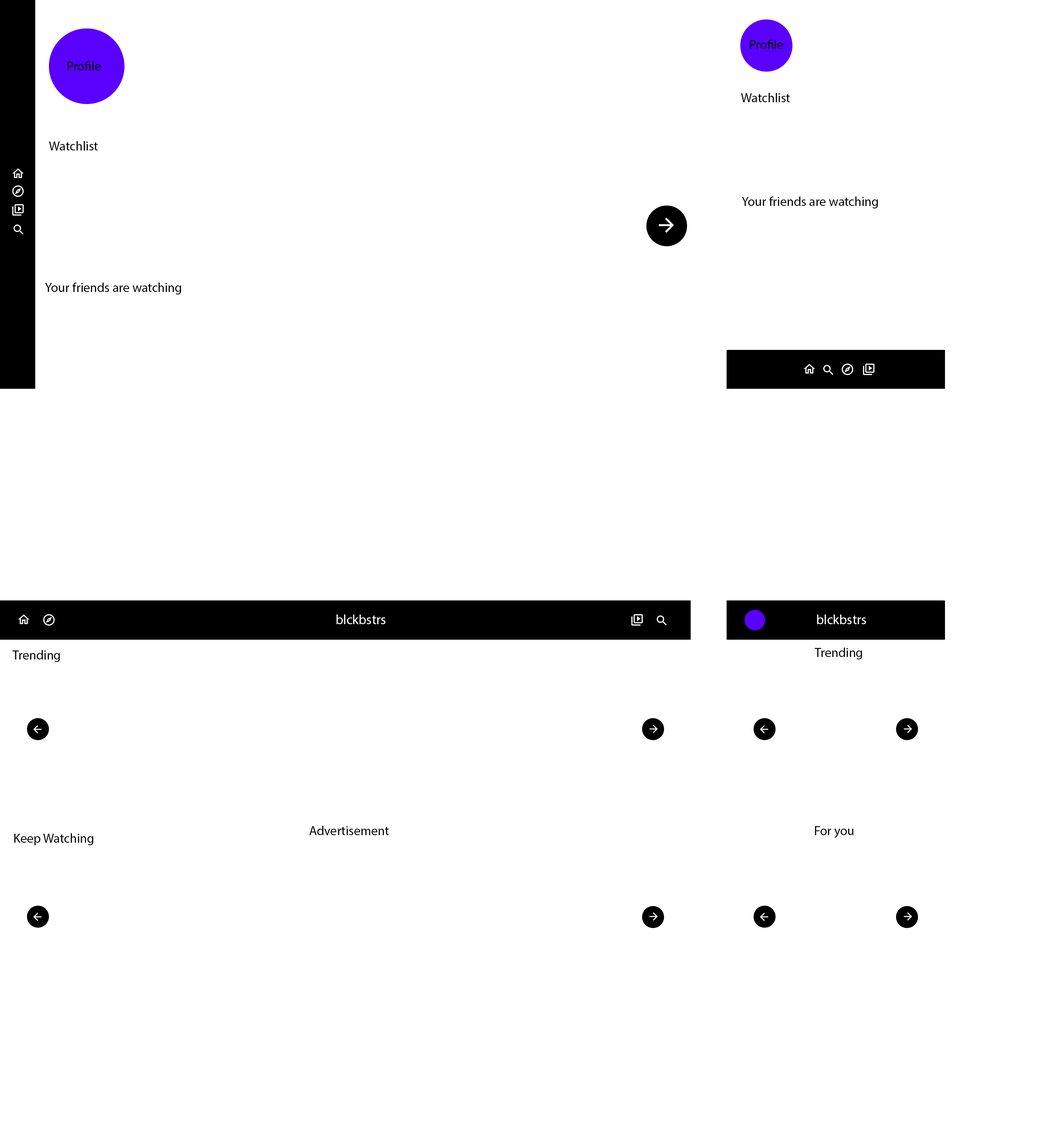
<style>
.page{position:relative;width:1059px;height:1126px;background:#ffffff}
.page>*{position:absolute;margin:0}
.t1{font:13px "MyriadPro-Regular";color:#000000}
.t2{font:13.5px "MyriadPro-Regular";color:#ffffff}
</style>
<div class="page">
<p class="t1" style="left:750px;top:40px;width:33px;height:9px">Profile</p>
<p class="t1" style="left:67px;top:61px;width:34px;height:10px">Profile</p>
<p class="t1" style="left:741px;top:93px;width:49px;height:9px">Watchlist</p>
<p class="t1" style="left:49px;top:141px;width:49px;height:9px">Watchlist</p>
<p class="t1" style="left:742px;top:196px;width:136px;height:12px">Your friends are watching</p>
<p class="t1" style="left:45px;top:282px;width:136px;height:12px">Your friends are watching</p>
<p class="t2" style="left:336px;top:614px;width:50px;height:10px">blckbstrs</p>
<p class="t2" style="left:817px;top:614px;width:50px;height:10px">blckbstrs</p>
<p class="t1" style="left:12px;top:650px;width:48px;height:12px">Trending</p>
<p class="t1" style="left:815px;top:647px;width:48px;height:12px">Trending</p>
<p class="t1" style="left:14px;top:833px;width:80px;height:12px">Keep Watching</p>
<p class="t1" style="left:309px;top:825px;width:80px;height:10px">Advertisement</p>
<p class="t1" style="left:815px;top:826px;width:39px;height:12px">For you</p>
</div>
